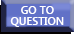
<style>
.page{position:relative;width:74px;height:34px;background:#6171c7}
.page>*{position:absolute;margin:0}
.t1{font:11px/11px "SegoeUI-SemiBold";color:#ffffff}
</style>
<div class="page">
<p class="t1" style="left:10px;top:6px;width:54px;height:21px;text-align:center">GO TO<br>QUESTION</p>
</div>
